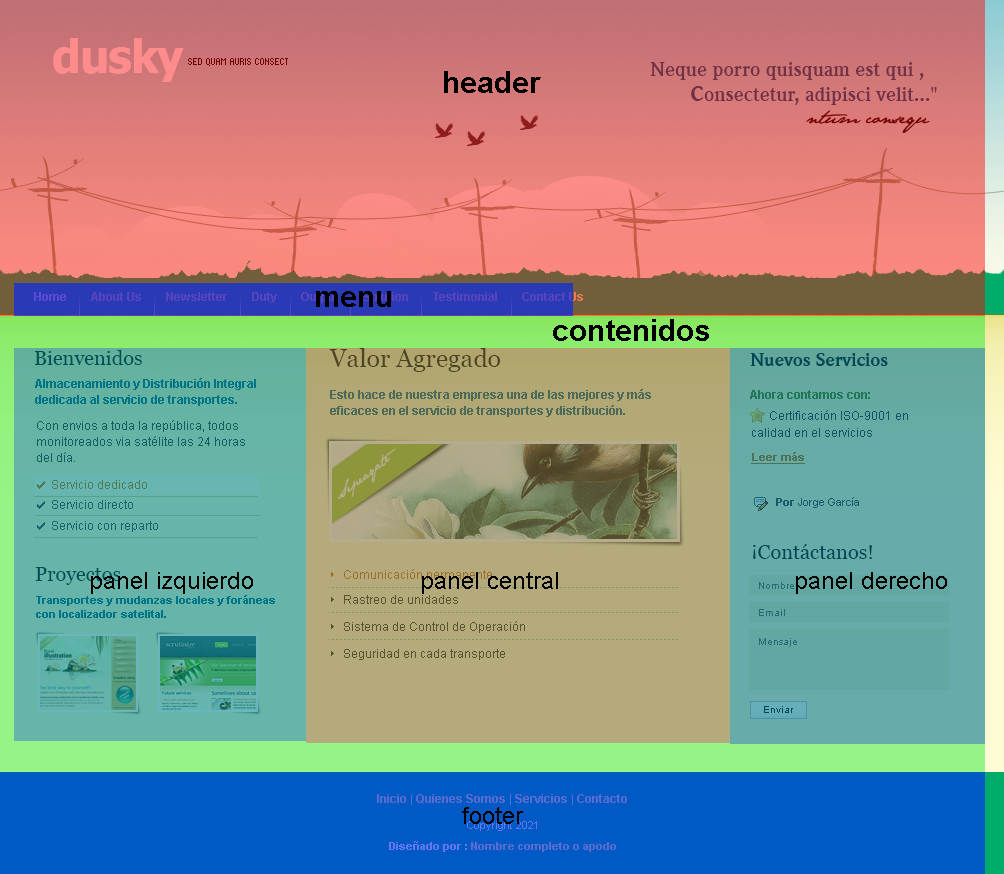
<style>
.page{position:relative;width:1004px;height:874px}
.page>*{position:absolute;margin:0}
.t1{font:46px "Tahoma-Bold";letter-spacing:-0.025em;color:#fe8c8c}
.t2{font:8px "Standard0757";color:#720000;text-transform:uppercase}
.t3{font:20px "WeidemannITCbyBT-Bold";color:#723246}
.t4{font:30px "Arial-BoldMT";color:#000000}
.t5{font:30px "WeidemannITCbyBT-Bold";color:#723246}
.t6{font:18px "JaneAusten";color:#720000}
.t7{font:12px "Arial-BoldMT";color:#5844bc}
.t8{font:20px "Georgia";color:#004f53}
.t9{font:25px "Georgia";color:#4d4425}
.t10{font:20px "WeidemannEF-Bold";color:#004653}
.t11{font:12px/16px "Arial-BoldMT";color:#007487}
.t12{font:12px/16px "Arial-BoldMT";color:#4d6959}
.t13{font:12px "Arial-BoldMT";color:#207757}
.t14{font:12px/17px "ArialMT";color:#0f5663}
.t15{font:12px/16px "ArialMT";color:#0f5f63}
.t16{font:13px "JaneAusten";color:#b4ac8c;font-weight:bold}
.t17{font:11px "Arial-BoldMT";color:#507056;text-decoration:underline}
.t18{font:12px "ArialMT";color:#507956}
.t19{font:11px "ArialMT";color:#155b68}
.t20{font:11px "Arial-BoldMT";color:#155b68}
.t21{font:12px "ArialMT";color:#16666a}
.t22{font:20px "Georgia";color:#004653}
.t23{font:12px "ArialMT";color:#9d6e28}
.t24{font:24px "ArialMT";color:#010101}
.t25{font:10px "ArialMT";color:#246d72}
.t26{font:11px/14px "Arial-BoldMT";color:#007487}
.t27{font:12px "ArialMT";color:#59532e}
.t28{font:10px "ArialMT";color:#004653}
.t29{font:12px "Arial-BoldMT";color:#596dd0}
.t30{font:11px "ArialMT";color:#6378ef}
.t31{font:11px "Arial-BoldMT"}
</style>
<div class="page">
<p class="t1" style="left:53px;top:38px;width:131px;height:44px">dusky</p>
<p class="t2" style="left:188px;top:58px;width:100px;height:8px">sed quam auris consect</p>
<p class="t3" style="left:650px;top:62px;width:274px;height:18px">Neque porro quisquam est qui ,</p>
<p class="t4" style="left:444px;top:71px;width:97px;height:22px">header</p>
<p class="t3" style="left:691px;top:86px;width:246px;height:19px"><span class="t5">c</span>onsectetur, adipisci velit..."</p>
<p class="t6" style="left:806px;top:110px;width:124px;height:23px">ntum consequ</p>
<p class="t7" style="left:34px;top:292px;width:549px;height:11px">Home        About Us        Newsletter        Duty        Output        Solution        Testimonial        Contact Us</p>
<p class="t4" style="left:316px;top:291px;width:75px;height:16px">menu</p>
<p class="t4" style="left:553px;top:319px;width:156px;height:22px">contenidos</p>
<p class="t8" style="left:34px;top:350px;width:108px;height:15px">Bienvenidos</p>
<p class="t9" style="left:329px;top:348px;width:172px;height:24px">Valor Agregado</p>
<p class="t10" style="left:750px;top:353px;width:138px;height:13px">Nuevos Servicios</p>
<p class="t11" style="left:35px;top:378px;width:221px;height:28px">Almacenamiento y Distribución Integral dedicada al servicio de transportes.</p>
<p class="t12" style="left:330px;top:389px;width:321px;height:28px">Esto hace de nuestra empresa una de las mejores y más eficaces en el servicio de transportes y distribución.</p>
<p class="t13" style="left:750px;top:390px;width:120px;height:9px">Ahora contamos con:</p>
<p class="t14" style="left:752px;top:410px;width:156px;height:27px">Certificación ISO-9001 en calidad en el servicios</p>
<p class="t15" style="left:37px;top:420px;width:208px;height:42px">Con envios a toda la república, todos monitoreados via satélite las 24 horas del día.</p>
<p class="t16" style="left:337px;top:448px;width:59px;height:51px;rotate:-38deg">Sepeaqate</p>
<p class="t17" style="left:751px;top:452px;width:54px;height:12px">Leer más</p>
<p class="t18" style="left:52px;top:480px;width:95px;height:9px">Servicio dedicado</p>
<p class="t19" style="left:776px;top:497px;width:83px;height:11px"><span class="t20">Por </span>Jorge García</p>
<p class="t21" style="left:52px;top:500px;width:81px;height:9px">Servicio directo</p>
<p class="t21" style="left:52px;top:521px;width:106px;height:11px">Servicio con reparto</p>
<p class="t22" style="left:753px;top:544px;width:119px;height:15px">¡Contáctanos!</p>
<p class="t8" style="left:35px;top:567px;width:86px;height:18px">Proyectos</p>
<p class="t23" style="left:344px;top:569px;width:148px;height:12px">Comunicación permanente</p>
<p class="t24" style="left:91px;top:572px;width:162px;height:22px">panel izquierdo</p>
<p class="t24" style="left:422px;top:572px;width:136px;height:22px">panel central</p>
<p class="t25" style="left:759px;top:582px;width:35px;height:7px">Nombre</p>
<p class="t24" style="left:796px;top:572px;width:151px;height:22px">panel derecho</p>
<p class="t26" style="left:36px;top:595px;width:239px;height:23px">Transportes y mudanzas locales y foráneas<br>con localizador satelital.</p>
<p class="t27" style="left:344px;top:595px;width:114px;height:9px">Rastreo de unidades</p>
<p class="t25" style="left:759px;top:609px;width:26px;height:7px">Email</p>
<p class="t27" style="left:344px;top:621px;width:181px;height:12px">Sistema de Control de Operación</p>
<p class="t25" style="left:759px;top:638px;width:38px;height:9px">Mensaje</p>
<p class="t27" style="left:344px;top:649px;width:161px;height:11px">Seguridad en cada transporte</p>
<p class="t28" style="left:764px;top:706px;width:29px;height:7px">Enviar</p>
<p class="t29" style="left:377px;top:794px;width:250px;height:11px">Inicio | Quienes Somos | Servicios | Contacto</p>
<p class="t24" style="left:462px;top:807px;width:61px;height:17px">footer</p>
<p class="t30" style="left:467px;top:821px;width:70px;height:10px">Copyright 2021</p>
<p class="t31" style="left:389px;top:841px;width:227px;height:11px">Diseñado por : Nombre completo o apodo</p>
</div>
